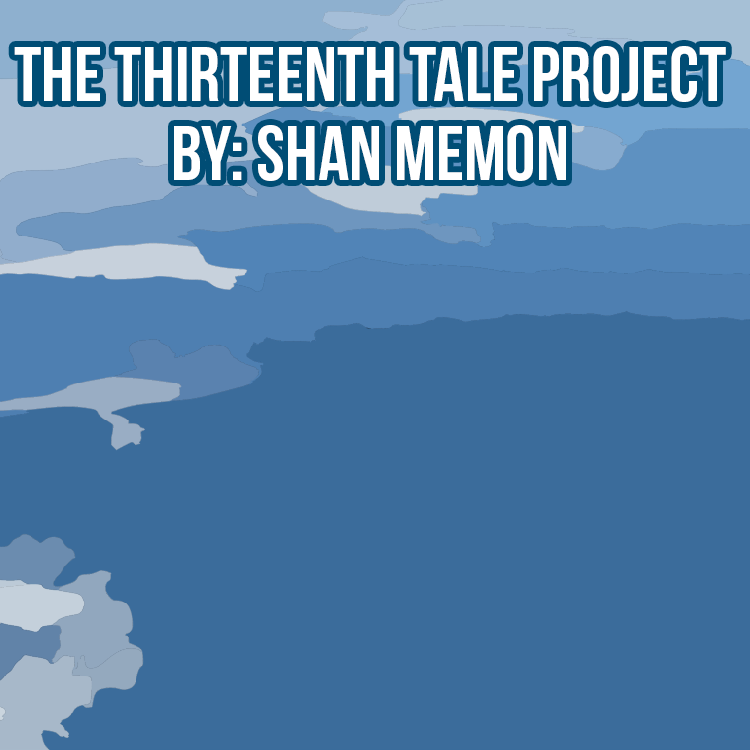
<style>
.page{position:relative;width:750px;height:750px;background:#3b6c9b}
.page>*{position:absolute;margin:0}
.t1{font:77.2px/79.6px "BebasNeue";color:#ffffff}
</style>
<div class="page">
<p class="t1" style="left:14px;top:46px;width:712px;height:135px;text-align:center">The Thirteenth Tale Project<br>By: Shan Memon</p>
</div>
